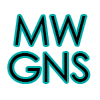
<style>
.page{position:relative;width:100px;height:100px;background:#ffffff}
.page>*{position:absolute;margin:0}
.t1{font:40px "CenturyGothic";letter-spacing:-0.01em;color:#000000}
</style>
<div class="page">
<p class="t1" style="left:15px;top:16px;width:71px;height:29px">MW</p>
<p class="t1" style="left:9px;top:53px;width:80px;height:29px">GNS</p>
</div>
